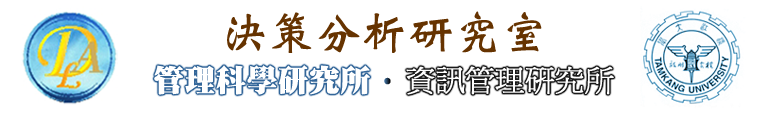
<style>
.page{position:relative;width:758px;height:115px;background:#ffffff}
.page>*{position:absolute;margin:0}
.t1{font:46px "DFWeiBeiStd-W7";color:#663300;font-weight:bold}
.t2{font:30.7px "DFMingStd-W14";color:#ffffff;font-weight:bold}
.t3{font:30.7px "PMingLiU";font-weight:bold}
.t4{font:29.4px "PMingLiU";color:#ffffff;font-weight:bold}
</style>
<div class="page">
<p class="t1" style="left:227px;top:11px;width:315px;height:42px">決策分析研究室</p>
<p class="t2" style="left:154px;top:65px;width:216px;height:30px">管理科學研究所</p>
<p class="t3" style="left:384px;top:77px;width:7px;height:8px">‧</p>
<p class="t4" style="left:406px;top:66px;width:208px;height:29px">資訊管理研究所</p>
</div>
